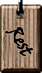
<style>
.page{position:relative;width:42px;height:73px}
.page>*{position:absolute;margin:0}
.t1{font:18px "VinerHandITC";letter-spacing:-0.08em;color:#000000;font-weight:bold}
</style>
<div class="page">
<p class="t1" style="left:5px;top:26px;width:29px;height:31px;rotate:60deg">Rest</p>
</div>
